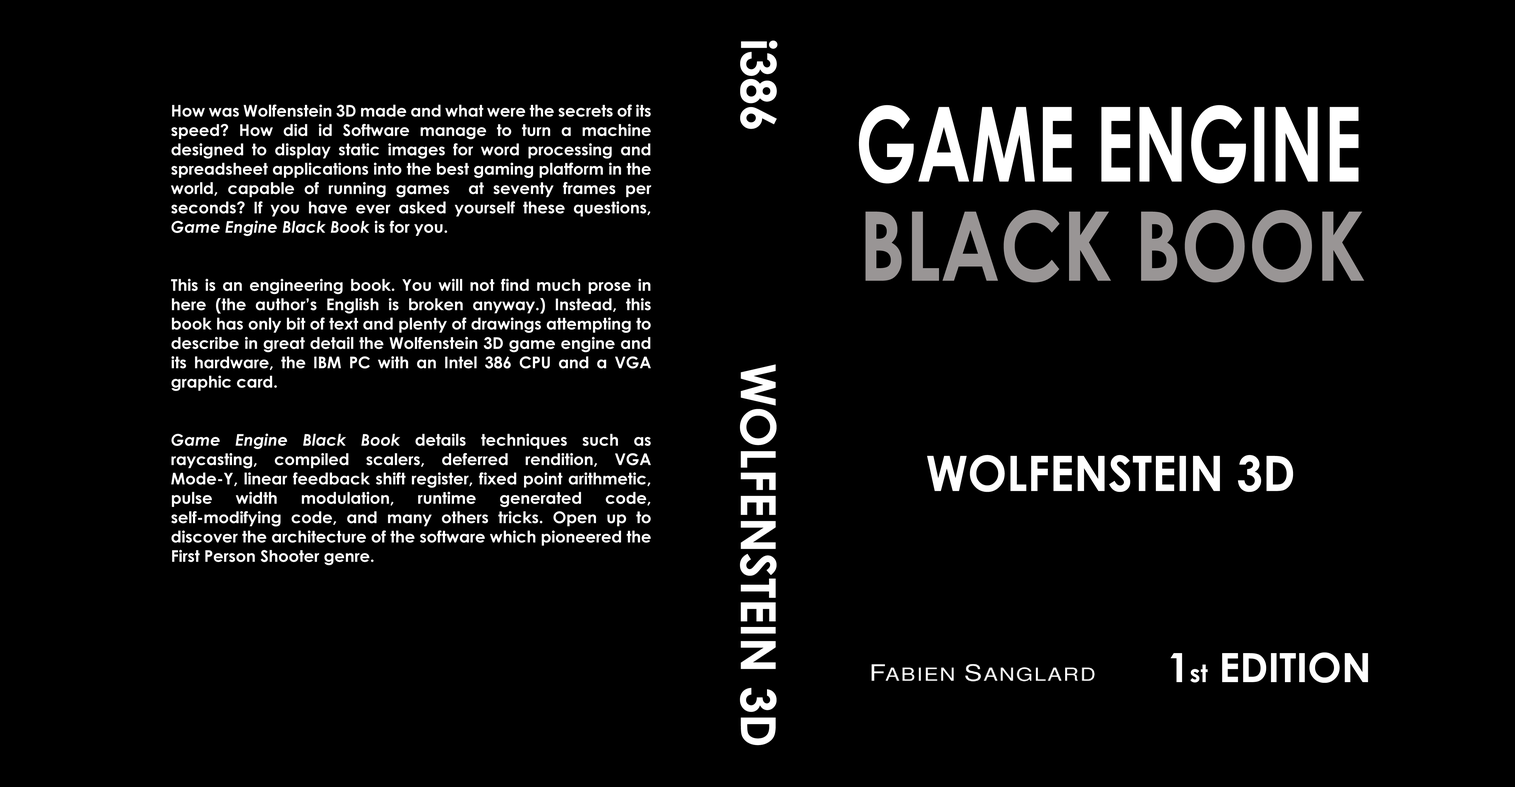
<style>
.page{position:relative;width:1515px;height:787px;background:#000000}
.page>*{position:absolute;margin:0}
.t1{font:48.4px "CenturyGothic-Bold";color:#ffffff}
.t2{font:16.1px "CenturyGothic-Bold";color:#ffffff}
.t3{font:16.1px "CenturyGothic-BoldItalic";color:#ffffff}
.t4{font:103.8px "CenturyGothic-Bold";color:#ffffff;scale:0.71 1}
.t5{font:96.2px "CenturyGothic-Bold";color:#999595;scale:0.83 1}
.t6{font:48.9px "CenturyGothic-Bold";color:#ffffff;scale:0.95 1}
.t7{font:40.3px "CenturyGothic-Bold";color:#ffffff}
.t8{font:24.2px "CenturyGothic-Bold";color:#ffffff}
</style>
<div class="page">
<p class="t1" style="left:740px;top:40px;width:38px;height:89px;rotate:90deg">i386</p>
<p class="t2" style="left:171px;top:105px;width:481px;height:460px;text-align:justify">How was Wolfenstein 3D made and what were the secrets of its speed? How did id Software manage to turn a machine designed to display static images for word processing and spreadsheet applications into the best gaming platform in the world, capable of running games  at seventy frames per seconds? If you have ever asked yourself these questions, <span class="t3">Game Engine Black Book</span> is for you.<br><br><br>This is an engineering book. You will not find much prose in here (the author’s English is broken anyway.) Instead, this book has only bit of text and plenty of drawings attempting to describe in great detail the Wolfenstein 3D game engine and its hardware, the IBM PC with an Intel 386 CPU and a VGA graphic card.<br><br><br><span class="t3">Game Engine Black Book</span> details techniques such as raycasting, compiled scalers, deferred rendition, VGA Mode-Y, linear feedback shift register, fixed point arithmetic, pulse width modulation, runtime generated code, self-modifying code, and many others tricks. Open up to discover the architecture of the software which pioneered the First Person Shooter genre.</p>
<p class="t4" style="left:859px;top:105px;width:500px;height:79px">GAME ENGINE</p>
<p class="t5" style="left:865px;top:210px;width:499px;height:73px">BLACK BOOK</p>
<p class="t1" style="left:740px;top:364px;width:37px;height:381px;rotate:90deg">WOLFENSTEIN 3D</p>
<p class="t6" style="left:927px;top:455px;width:366px;height:37px">WOLFENSTEIN 3D</p>
<p class="t7" style="left:1170px;top:652px;width:198px;height:31px">1<span class="t8">st</span> EDITION</p>
</div>
